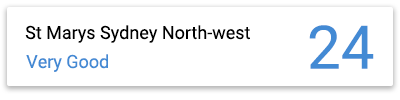
<style>
.page{position:relative;width:400px;height:100px;background:#ffffff}
.page>*{position:absolute;margin:0}
.t1{font:18px "Roboto-Regular";color:#000000}
.t2{font:60px "Roboto-Regular";color:#438ad4}
.t3{font:18px "Roboto-Regular";color:#438ad4}
</style>
<div class="page">
<p class="t1" style="left:25px;top:25px;width:225px;height:18px">St Marys Sydney North-west</p>
<p class="t2" style="left:309px;top:25px;width:65px;height:44px">24</p>
<p class="t3" style="left:26px;top:54px;width:82px;height:18px">Very Good</p>
</div>
